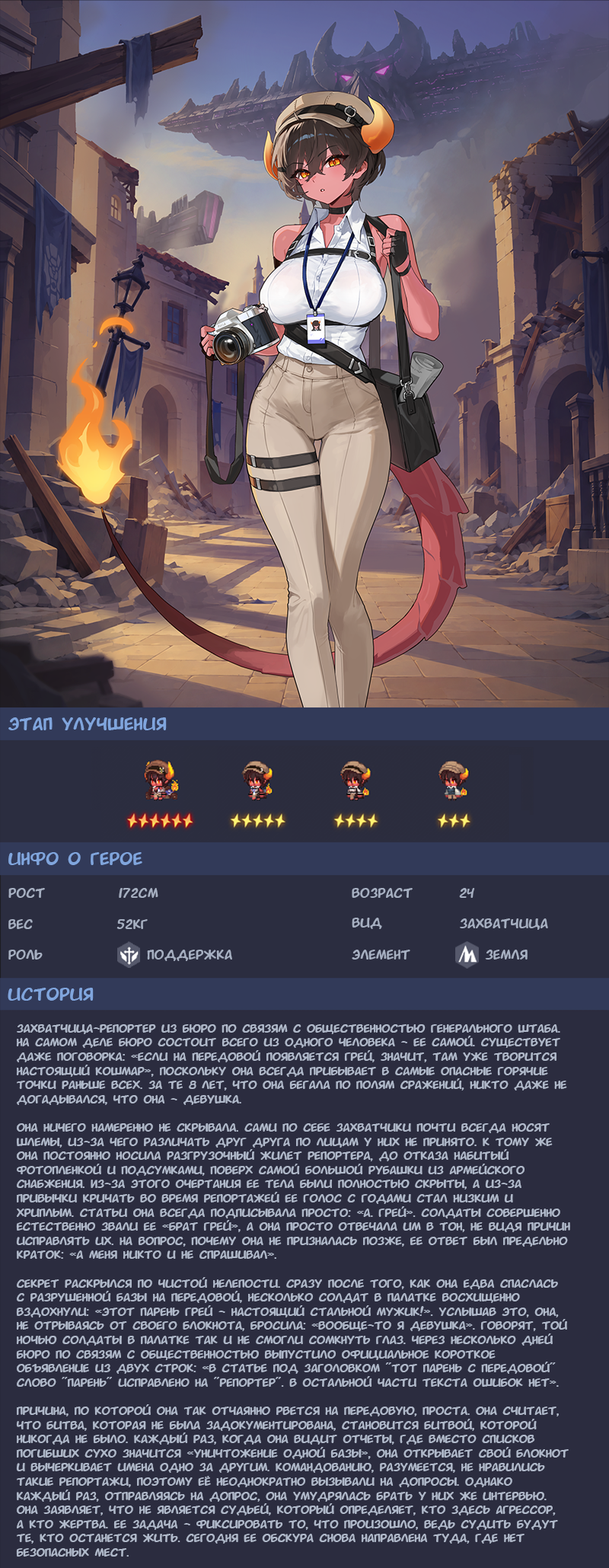
<style>
.page{position:relative;width:609px;height:1568px}
.page>*{position:absolute;margin:0}
.t1{font:18.3px "MPMangaFontBold";color:#80a5dd}
.t2{font:13.7px "MPMangaFontBold";color:#a6afc1}
.t3{font:11.8px "MPMangaFontBold";color:#b0b9ca}
</style>
<div class="page">
<p class="t1" style="left:8px;top:717px;width:159px;height:13px">этап улучшения</p>
<p class="t1" style="left:8px;top:852px;width:134px;height:13px">инфо о герое</p>
<p class="t2" style="left:8px;top:888px;width:37px;height:10px">рост</p>
<p class="t2" style="left:119px;top:888px;width:39px;height:10px">172см</p>
<p class="t2" style="left:352px;top:888px;width:61px;height:10px">возраст</p>
<p class="t2" style="left:459px;top:888px;width:16px;height:10px">24</p>
<p class="t2" style="left:352px;top:918px;width:30px;height:11px">вид</p>
<p class="t2" style="left:8px;top:919px;width:25px;height:10px">вес</p>
<p class="t2" style="left:117px;top:919px;width:31px;height:10px">52кг</p>
<p class="t2" style="left:460px;top:918px;width:88px;height:12px">захватчица</p>
<p class="t2" style="left:8px;top:950px;width:35px;height:10px">роль</p>
<p class="t2" style="left:147px;top:950px;width:85px;height:11px">поддержка</p>
<p class="t2" style="left:352px;top:950px;width:58px;height:10px">элемент</p>
<p class="t2" style="left:485px;top:950px;width:43px;height:10px">земля</p>
<p class="t1" style="left:8px;top:988px;width:86px;height:13px">история</p>
<p class="t3" style="left:16px;top:1024px;width:554px;height:533px">захватчица-репортер из Бюро по связям с общественностью Генерального штаба.<br>На самом деле Бюро состоит всего из одного человека - ее самой. Существует<br>даже поговорка: «Если на передовой появляется Грей, значит, там уже творится<br>настоящий кошмар», поскольку она всегда прибывает в самые опасные горячие<br>точки раньше всех. За те 8 лет, что она бегала по полям сражений, никто даже не<br>догадывался, что она - девушка.<br><br>Она ничего намеренно не скрывала. Сами по себе захватчики почти всегда носят<br>шлемы, из-за чего различать друг друга по лицам у них не принято. К тому же<br>она постоянно носила разгрузочный жилет репортера, до отказа набитый<br>фотопленкой и подсумками, поверх самой большой рубашки из армейского<br>снабжения. Из-за этого очертания ее тела были полностью скрыты, а из-за<br>привычки кричать во время репортажей ее голос с годами стал низким и<br>хриплым. Статьи она всегда подписывала просто: «А. Грей». Солдаты совершенно<br>естественно звали ее «брат Грей», а она просто отвечала им в тон, не видя причин<br>исправлять их. На вопрос, почему она не призналась позже, ее ответ был предельно<br>краток: «А меня никто и не спрашивал».<br><br>Секрет раскрылся по чистой нелепости. Сразу после того, как она едва спаслась<br>с разрушенной базы на передовой, несколько солдат в палатке восхищенно<br>вздохнули: «Этот парень Грей - настоящий стальной мужик!». Услышав это, она,<br>не отрываясь от своего блокнота, бросила: «Вообще-то я девушка». Говорят, той<br>ночью солдаты в палатке так и не смогли сомкнуть глаз. Через несколько дней<br>Бюро по связям с общественностью выпустило официальное короткое<br>объявление из двух строк: «В статье под заголовком "Тот парень с передовой"<br>слово "парень" исправлено на "репортер". В остальной части текста ошибок нет».<br><br>Причина, по которой она так отчаянно рвется на передовую, проста. Она считает,<br>что битва, которая не была задокументирована, становится битвой, которой<br>никогда не было. Каждый раз, когда она видит отчеты, где вместо списков<br>погибших сухо значится «Уничтожение одной базы», она открывает свой блокнот<br>и вычеркивает имена одно за другим. Командованию, разумеется, не нравились<br>такие репортажи, поэтому её неоднократно вызывали на допросы. Однако<br>каждый раз, отправляясь на допрос, она умудрялась брать у них же интервью.<br>Она заявляет, что не является судьей, который определяет, кто здесь агрессор,<br>а кто жертва. Ее задача - фиксировать то, что произошло, ведь судить будут<br>те, кто останется жить. Сегодня ее обскура снова направлена туда, где нет<br>безопасных мест.</p>
</div>
